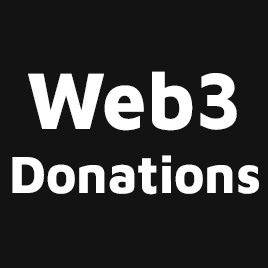
<style>
.page{position:relative;width:268px;height:268px;background:#131313}
.page>*{position:absolute;margin:0}
.t1{font:82.8px "MavenPro-ExtraBold";color:#ffffff;scale:0.95 1}
.t2{font:53.9px "MavenPro-ExtraBold";color:#ffffff;scale:0.95 1}
</style>
<div class="page">
<p class="t1" style="left:28px;top:71px;width:209px;height:60px">Web3</p>
<p class="t2" style="left:12px;top:155px;width:247px;height:40px">Donations</p>
</div>
